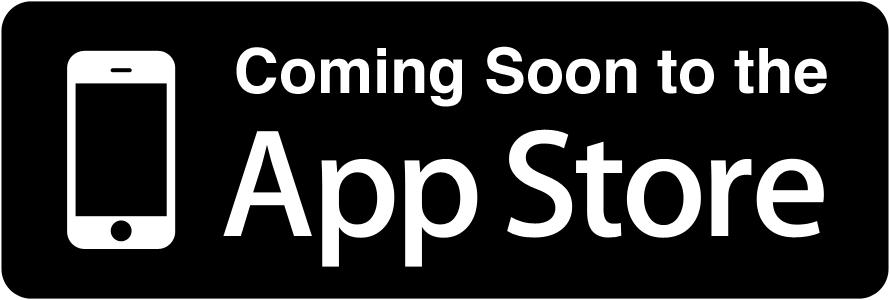
<style>
.page{position:relative;width:890px;height:300px;background:#000000}
.page>*{position:absolute;margin:0}
.t1{font:62.5px "Helvetica-Bold";color:#ffffff}
</style>
<div class="page">
<p class="t1" style="left:236px;top:46px;width:591px;height:61px">Coming Soon to the</p>
</div>
